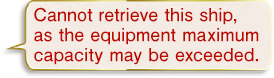
<style>
.page{position:relative;width:274px;height:78px;background:#f4ece4}
.page>*{position:absolute;margin:0}
.t1{font:18px/20px "FutoGoB101Pr5-Bold";color:#bd0800}
</style>
<div class="page">
<p class="t1" style="left:34px;top:7px;width:225px;height:58px">Cannot retrieve this ship,<br>as the equipment maximum<br>capacity may be exceeded.</p>
</div>
